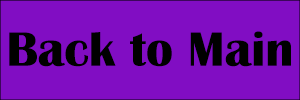
<style>
.page{position:relative;width:300px;height:100px;background:#810dc3}
.page>*{position:absolute;margin:0}
.t1{font:50px "BritannicBold";color:#000000}
</style>
<div class="page">
<p class="t1" style="left:9px;top:31px;width:282px;height:36px">Back to Main</p>
</div>
